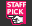
<style>
.page{position:relative;width:32px;height:26px;background:#333333}
.page>*{position:absolute;margin:0}
.t1{font:6.9px/6.6px "AmiraParadiso";color:#ffffff}
.t2{font:6.9px/6.6px "AmiraParadiso";letter-spacing:0.05em;color:#ffffff}
</style>
<div class="page">
<p class="t1" style="left:7px;top:2px;width:20px;height:13px">STAFF <br><span class="t2">PICK</span></p>
</div>
